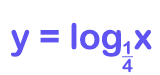
<style>
.page{position:relative;width:160px;height:75px;background:#ffffff}
.page>*{position:absolute;margin:0}
.t1{font:36px "ArialRoundedMTBold";color:#5f54f1}
.t2{font:18px/18px "ArialRoundedMTBold";color:#5f54f1;text-decoration:underline}
.t3{font:18px/18px "ArialRoundedMTBold";color:#5f54f1}
</style>
<div class="page">
<p class="t1" style="left:10px;top:22px;width:142px;height:35px">y = log  x</p>
<p class="t2" style="left:122px;top:41px;width:11px;height:32px;text-align:center">1<br><span class="t3">4</span></p>
</div>
